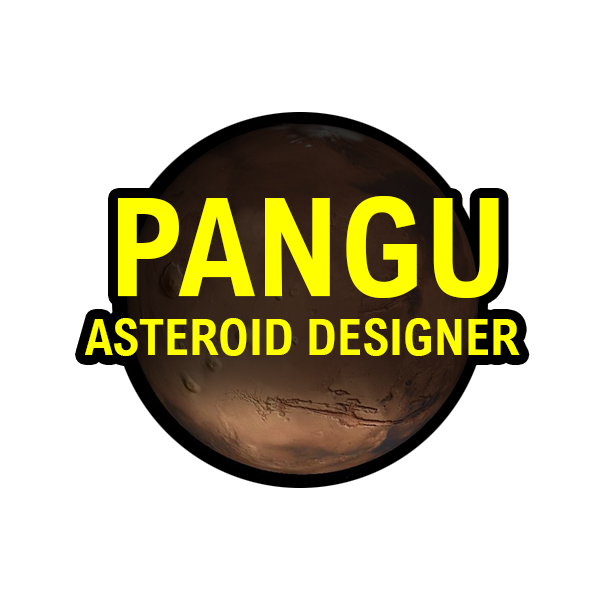
<style>
.page{position:relative;width:600px;height:600px;background:#ffffff}
.page>*{position:absolute;margin:0}
.t1{font:137.2px "ArialNovaCond-Bold";color:#ffff00}
.t2{font:49.9px "ArialNovaCond-Bold";color:#ffff00}
</style>
<div class="page">
<p class="t1" style="left:118px;top:196px;width:381px;height:102px">PANGU</p>
<p class="t2" style="left:85px;top:318px;width:435px;height:38px">ASTEROID DESIGNER</p>
</div>
